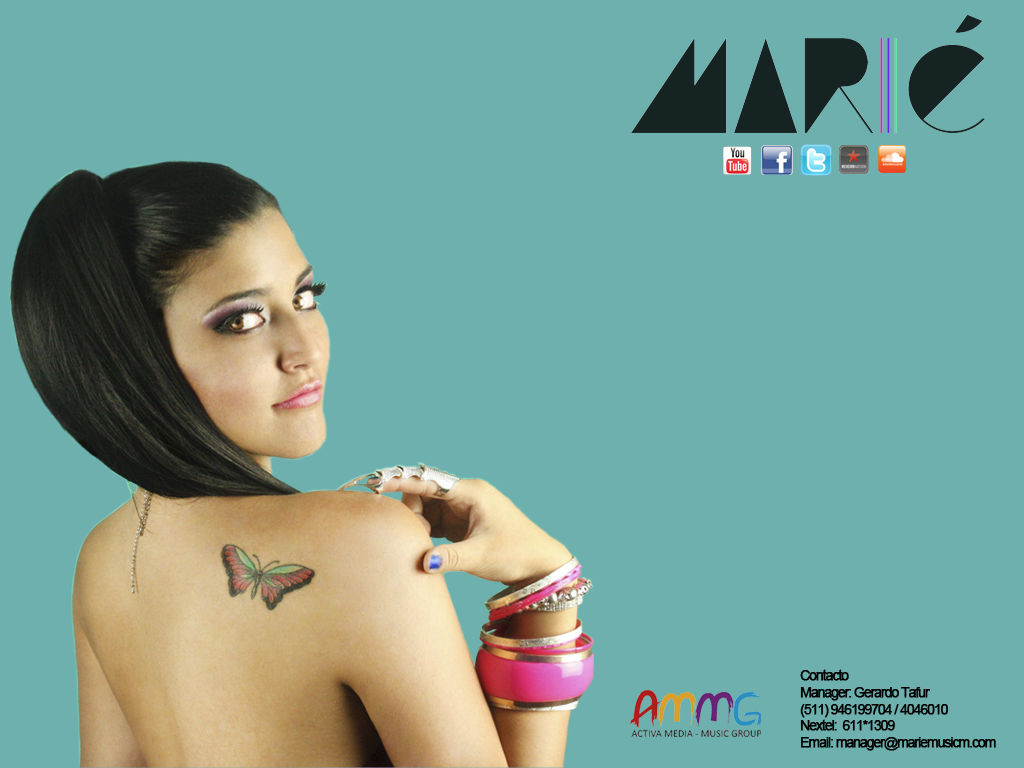
<style>
.page{position:relative;width:1024px;height:768px;background:#6db0ae}
.page>*{position:absolute;margin:0}
.t1{font:14px "ArialMT";letter-spacing:-0.1em;color:#000000;font-weight:bold}
</style>
<div class="page">
<p class="t1" style="left:800px;top:669px;width:196px;height:82px">Contacto<br>Manager: Gerardo Tafur<br>(511) 946199704 / 4046010<br>Nextel:  611*1309<br>Email: manager@mariemusicm.com</p>
</div>
